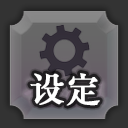
<style>
.page{position:relative;width:128px;height:128px}
.page>*{position:absolute;margin:0}
.t1{font:34px "TypographyOldP-Medium";color:#ffffff;font-weight:bold}
</style>
<div class="page">
<p class="t1" style="left:30px;top:73px;width:70px;height:33px">设定</p>
</div>
